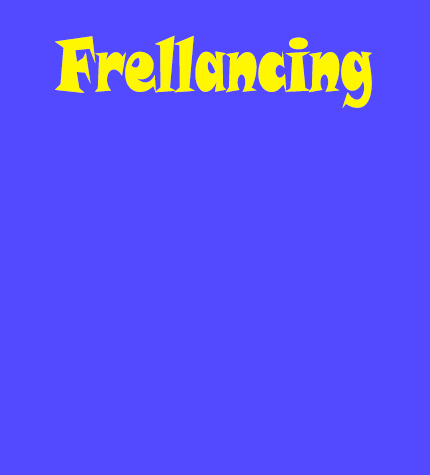
<style>
.page{position:relative;width:430px;height:475px;background:#534aff}
.page>*{position:absolute;margin:0}
.t1{font:75px "SnapITC-Regular";color:#fff601;scale:0.67 1}
</style>
<div class="page">
<p class="t1" style="left:55px;top:35px;width:317px;height:73px">Frellancing</p>
</div>
